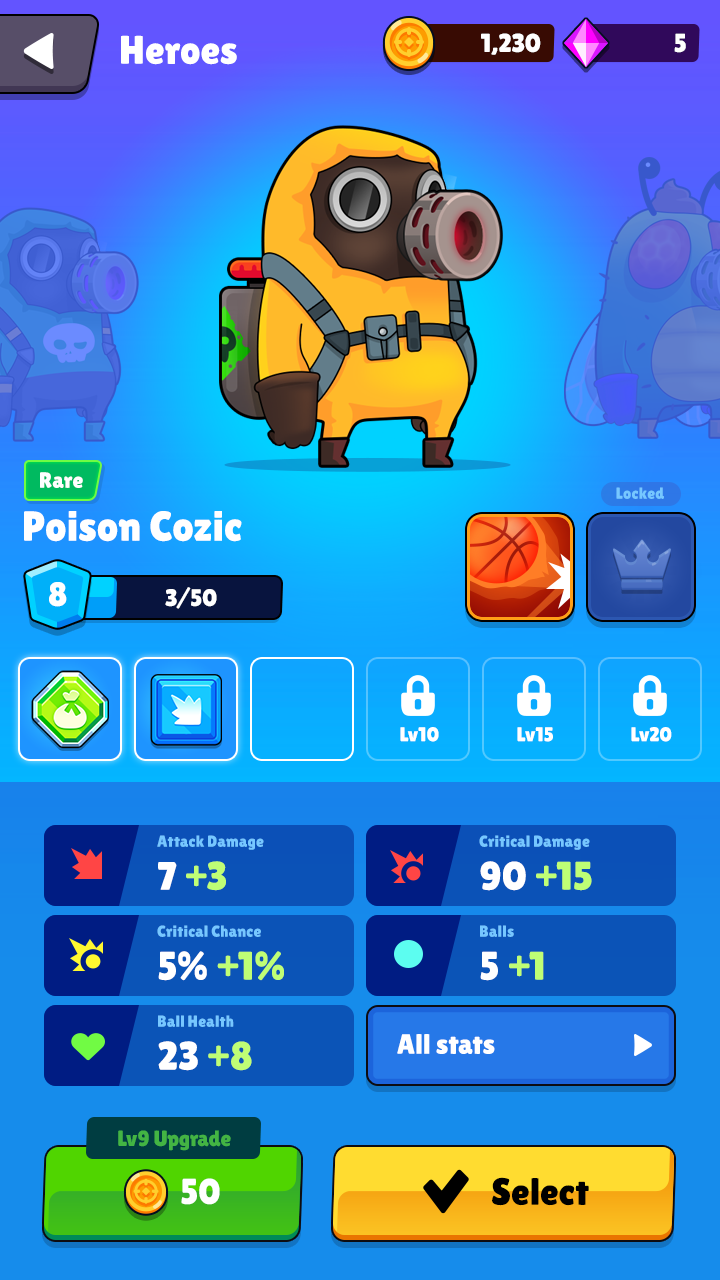
<style>
.page{position:relative;width:720px;height:1280px}
.page>*{position:absolute;margin:0}
.t1{font:40px "LilitaOne";color:#ffffff}
.t2{font:26px "LilitaOne";letter-spacing:-0.01em;color:#ffffff;text-transform:uppercase}
.t3{font:22px "LilitaOne";color:#ffffff}
.t4{font:16px "LilitaOne";color:#76c7ff}
.t5{font:42px "LilitaOne";color:#ffffff}
.t6{font:34px "LilitaOne";color:#ffffff;text-transform:uppercase}
.t7{font:24px "LilitaOne";color:#ffffff;text-transform:uppercase}
.t8{font:20px "LilitaOne";color:#ffffff}
.t9{font:40px "LilitaOne";color:#bffe75}
.t10{font:28px "LilitaOne";color:#ffffff}
.t11{font:22px "LilitaOne";color:#43b443}
.t12{font:36px "LilitaOne";color:#ffffff;text-transform:uppercase}
.t13{font:38px "LilitaOne";color:#000000}
</style>
<div class="page">
<p class="t1" style="left:121px;top:35px;width:116px;height:30px">Heroes</p>
<p class="t2" style="left:481px;top:33px;width:60px;height:22px">1,230</p>
<p class="t2" style="left:674px;top:33px;width:12px;height:20px">5</p>
<p class="t3" style="left:40px;top:472px;width:43px;height:16px">Rare</p>
<p class="t4" style="left:616px;top:487px;width:48px;height:12px">Locked</p>
<p class="t5" style="left:24px;top:511px;width:218px;height:31px">Poison Cozic</p>
<p class="t6" style="left:49px;top:582px;width:18px;height:25px">8</p>
<p class="t7" style="left:165px;top:587px;width:52px;height:22px">3/50</p>
<p class="t8" style="left:400px;top:727px;width:39px;height:15px">Lv10</p>
<p class="t8" style="left:517px;top:727px;width:36px;height:15px">Lv15</p>
<p class="t8" style="left:631px;top:727px;width:41px;height:15px">Lv20</p>
<p class="t4" style="left:157px;top:835px;width:107px;height:15px">Attack Damage</p>
<p class="t4" style="left:479px;top:835px;width:111px;height:15px">Critical Damage</p>
<p class="t9" style="left:158px;top:861px;width:68px;height:30px"><span class="t1">7 </span>+3</p>
<p class="t9" style="left:480px;top:861px;width:112px;height:30px"><span class="t1">90 </span>+15</p>
<p class="t4" style="left:157px;top:925px;width:104px;height:12px">Critical Chance</p>
<p class="t4" style="left:480px;top:925px;width:34px;height:12px">Balls</p>
<p class="t9" style="left:158px;top:951px;width:126px;height:30px"><span class="t1">5% </span>+1%</p>
<p class="t9" style="left:480px;top:951px;width:64px;height:30px"><span class="t1">5 </span>+1</p>
<p class="t4" style="left:158px;top:1015px;width:76px;height:12px">Ball Health</p>
<p class="t10" style="left:397px;top:1034px;width:98px;height:20px">All stats</p>
<p class="t1" style="left:158px;top:1041px;width:94px;height:30px">23 <span class="t9">+8</span></p>
<p class="t11" style="left:118px;top:1130px;width:113px;height:21px">Lv9 Upgrade</p>
<p class="t12" style="left:181px;top:1178px;width:39px;height:27px">50</p>
<p class="t13" style="left:492px;top:1177px;width:97px;height:29px">Select</p>
</div>
